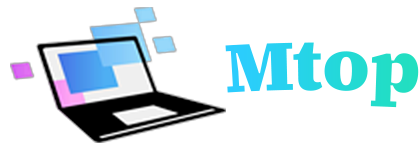
<style>
.page{position:relative;width:420px;height:150px;background:#ffffff}
.page>*{position:absolute;margin:0}
.t1{font:72px "SourceSerif4Roman-CaptionBlack"}
</style>
<div class="page">
<p class="t1" style="left:225px;top:42px;width:194px;height:66px">Mtop</p>
</div>
